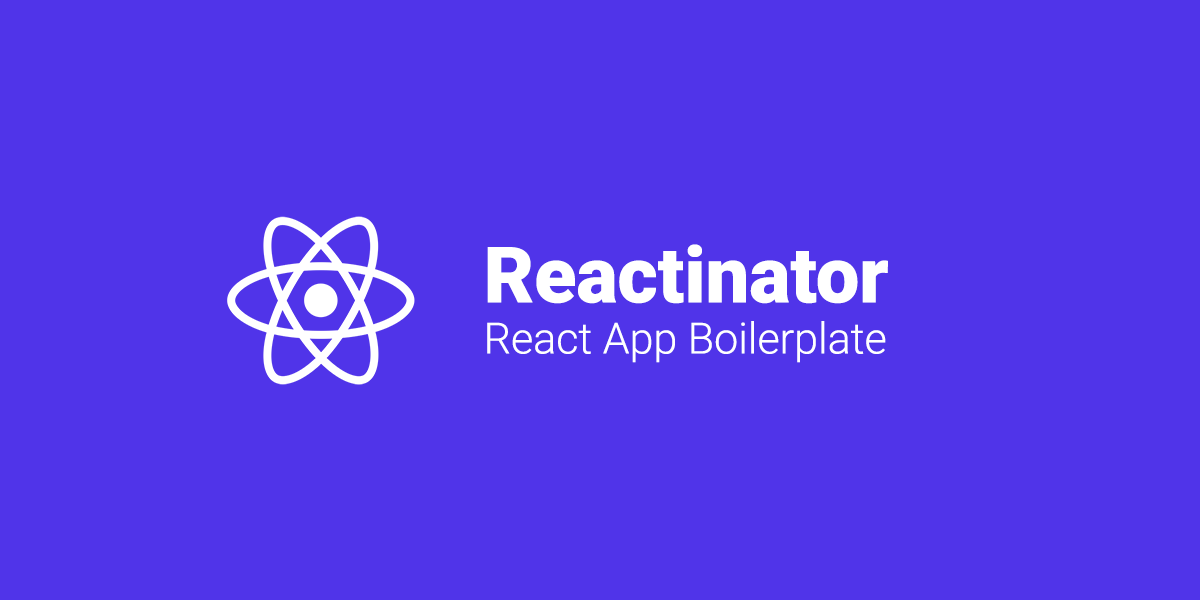
<style>
.page{position:relative;width:1200px;height:600px;background:#5034e9}
.page>*{position:absolute;margin:0}
.t1{font:77.7px "Roboto-Black";color:#ffffff}
.t2{font:43px "Roboto-Light";color:#ffffff}
</style>
<div class="page">
<p class="t1" style="left:487px;top:244px;width:401px;height:60px">Reactinator</p>
<p class="t2" style="left:487px;top:321px;width:399px;height:42px">React App Boilerplate</p>
</div>
